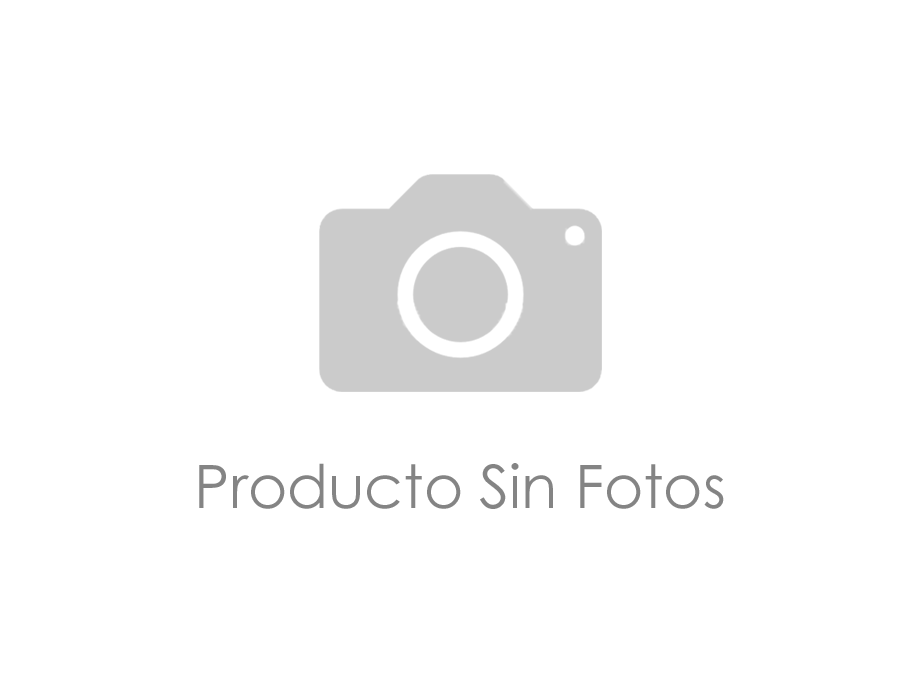
<style>
.page{position:relative;width:922px;height:688px;background:#ffffff}
.page>*{position:absolute;margin:0}
.t1{font:60px "CenturyGothic";color:#848484}
</style>
<div class="page">
<p class="t1" style="left:199px;top:463px;width:525px;height:46px">Producto Sin Fotos</p>
</div>
